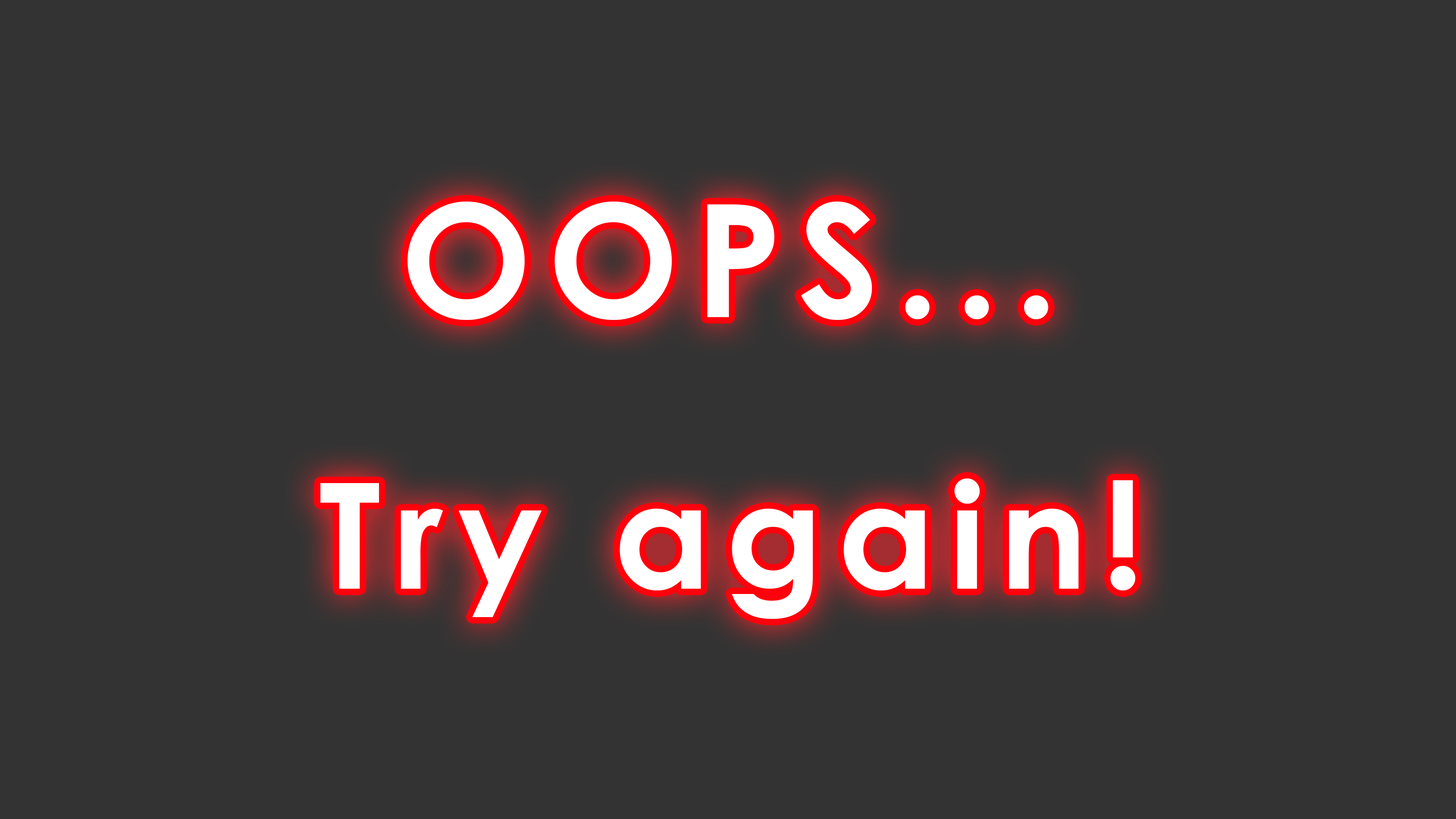
<style>
.page{position:relative;width:1456px;height:819px;background:#333333}
.page>*{position:absolute;margin:0}
.t1{font:156.7px "CenturyGothic-Bold";letter-spacing:0.1em;color:#ffffff}
.t2{font:147.3px "CenturyGothic-Bold";letter-spacing:0.1em;color:#ffffff}
</style>
<div class="page">
<p class="t1" style="left:407px;top:202px;width:641px;height:118px">OOPS...</p>
<p class="t2" style="left:320px;top:478px;width:815px;height:141px">Try again!</p>
</div>
